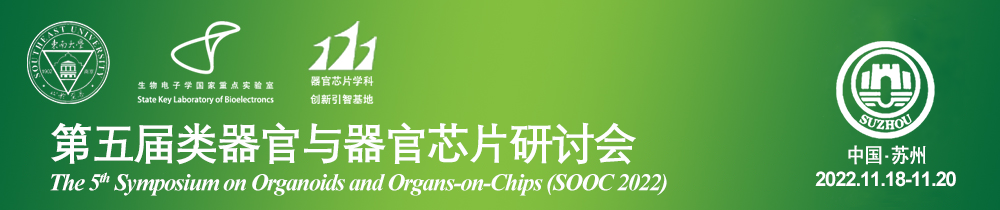
<style>
.page{position:relative;width:1000px;height:210px}
.page>*{position:absolute;margin:0}
.t1{font:44px "DengXian-Bold";letter-spacing:-0.05em;color:#fefefe}
.t2{font:20.3px "SimHei";letter-spacing:-0.05em;color:#ffffff;font-weight:bold;scale:0.9 1}
.t3{font:24px "TimesNewRomanPS-BoldItalicMT";letter-spacing:-0.05em;color:#fefefe}
.t4{font:20px "Arial-BoldMT";letter-spacing:-0.05em;color:#fefefe}
</style>
<div class="page">
<p class="t1" style="left:51px;top:122px;width:585px;height:43px">第五届类器官与器官芯片研讨会</p>
<p class="t2" style="left:848px;top:145px;width:78px;height:20px">中国 苏州</p>
<p class="t3" style="left:50px;top:172px;width:617px;height:24px">The 5th Symposium on Organoids and Organs-on-Chips (SOOC 2022)</p>
<p class="t4" style="left:815px;top:171px;width:141px;height:16px">2022.11.18-11.20</p>
</div>
